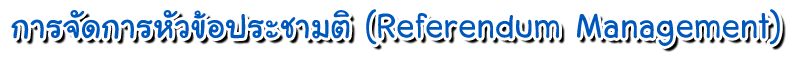
<style>
.page{position:relative;width:794px;height:57px;background:#ffffff}
.page>*{position:absolute;margin:0}
.t1{font:48px "LayijiMaHaNiYomV1.2";color:#0058bc}
</style>
<div class="page">
<p class="t1" style="left:11px;top:9px;width:769px;height:37px">การจัดการหัวข้อประชามติ (Referendum Management)</p>
</div>
